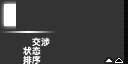
<style>
.page{position:relative;width:128px;height:64px;background:#333333}
.page>*{position:absolute;margin:0}
.t1{font:8.7px "DFKingGothicSC14-Semibold";letter-spacing:0.005em;color:#ffffff}
</style>
<div class="page">
<p class="t1" style="left:32px;top:37px;width:18px;height:9px">交涉</p>
<p class="t1" style="left:23px;top:46px;width:18px;height:9px">状态</p>
<p class="t1" style="left:23px;top:55px;width:18px;height:9px">排序</p>
</div>
